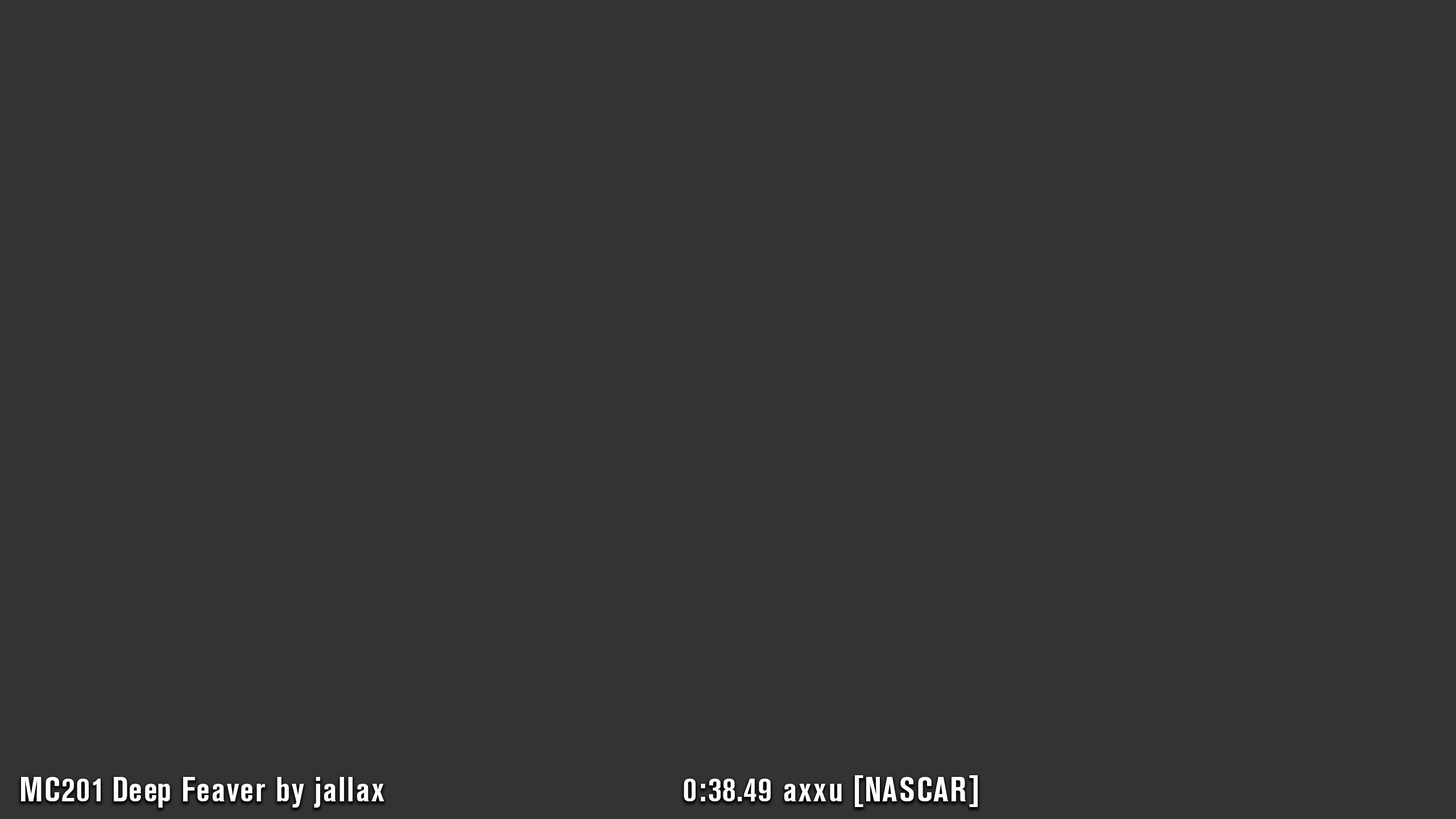
<style>
.page{position:relative;width:1456px;height:819px;background:#333333}
.page>*{position:absolute;margin:0}
.t1{font:34.1px "AkzidenzGroteskCn_PFL-Bold";letter-spacing:0.03em;color:#ffffff}
</style>
<div class="page">
<p class="t1" style="left:21px;top:777px;width:363px;height:31px">MC201 Deep Feaver by jallax</p>
<p class="t1" style="left:684px;top:779px;width:87px;height:22px">0:38.49</p>
<p class="t1" style="left:784px;top:775px;width:194px;height:32px">axxu [NASCAR]</p>
</div>
